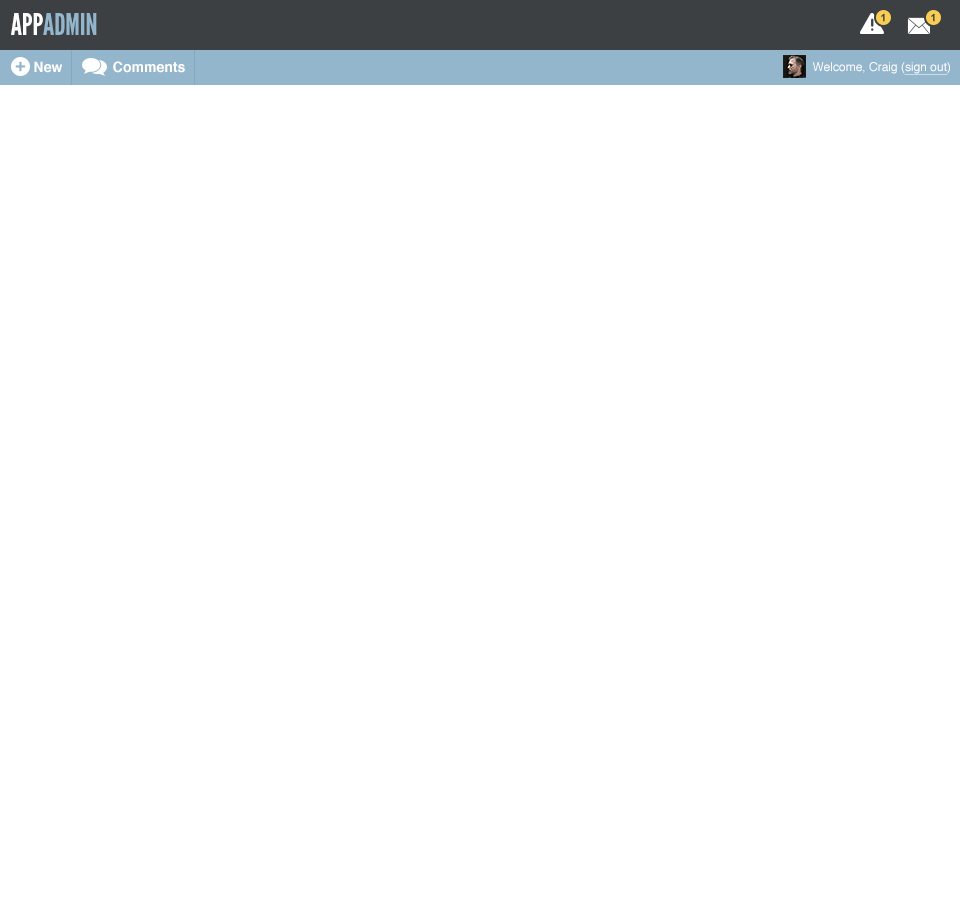
<style>
.page{position:relative;width:960px;height:900px;background:#ffffff}
.page>*{position:absolute;margin:0}
.t1{font:30px "LeagueGothic";color:#93b6cd}
.t2{font:30px "LeagueGothic";color:#ffffff}
.t3{font:14px "Helvetica-Bold";color:#ffffff}
.t4{font:12px "Helvetica";color:#ffffff}
.t5{font:12px "Helvetica";color:#ffffff;text-decoration:underline}
</style>
<div class="page">
<p class="t1" style="left:11px;top:13px;width:86px;height:22px"><span class="t2">APP</span>ADMIN</p>
<p class="t3" style="left:34px;top:61px;width:29px;height:12px">New</p>
<p class="t3" style="left:113px;top:61px;width:72px;height:12px">Comments</p>
<p class="t4" style="left:813px;top:62px;width:137px;height:13px">Welcome, Craig (<span class="t5">sign out</span>)</p>
</div>
